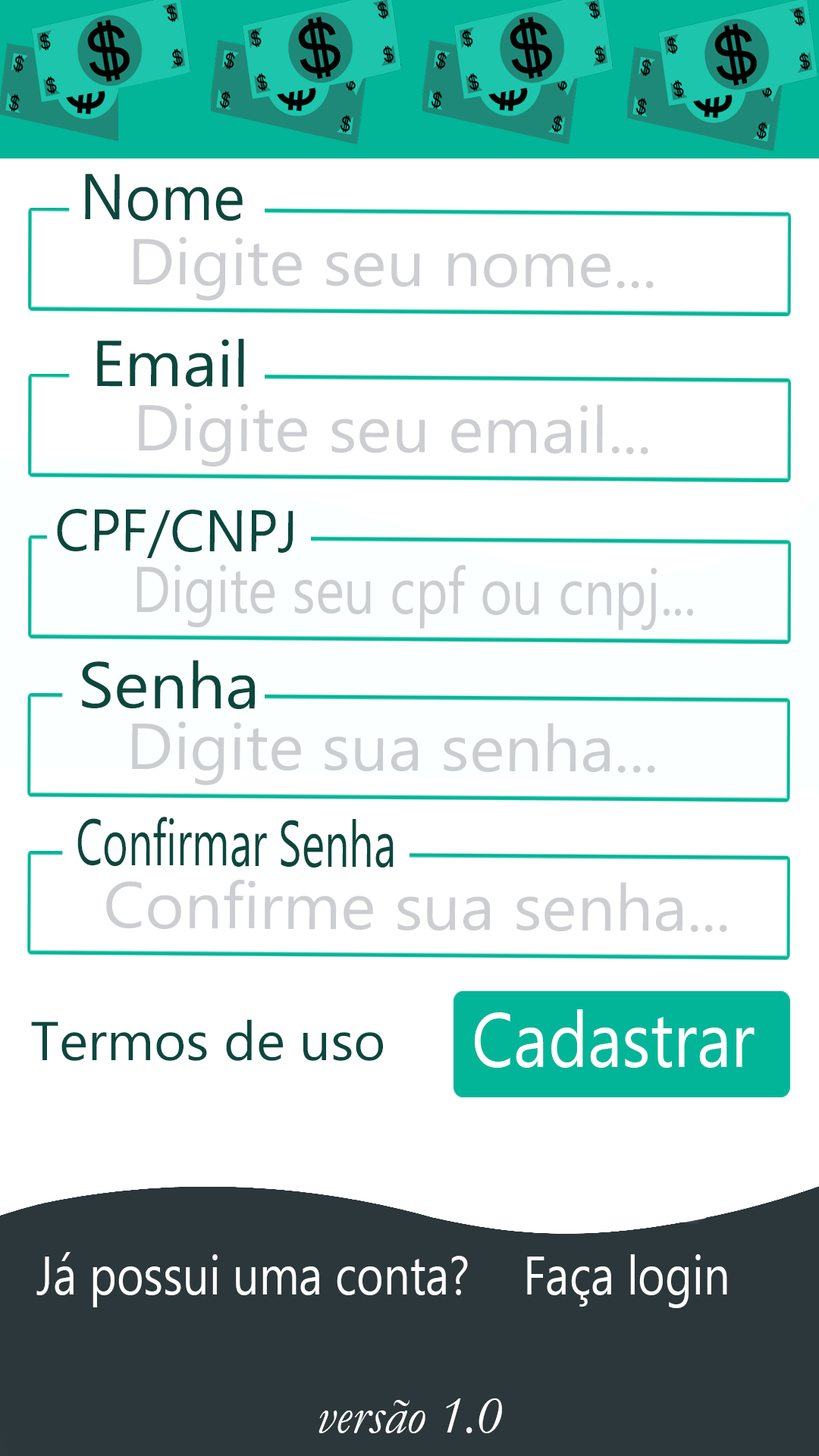
<style>
.page{position:relative;width:819px;height:1456px;background:#ffffff}
.page>*{position:absolute;margin:0}
.t1{font:64.8px "MicrosoftTaiLe";color:#0b473d;scale:0.94 1}
.t2{font:64.9px "MicrosoftNewTaiLue";color:#ccced1;scale:1.04 1}
.t3{font:64.9px "MicrosoftTaiLe";color:#0b473d;scale:1.04 1}
.t4{font:58.9px "MicrosoftTaiLe";color:#0b473d;scale:0.95 1}
.t5{font:64.7px "MicrosoftNewTaiLue";color:#cbced1;scale:0.85 1}
.t6{font:64.9px "MicrosoftNewTaiLue";color:#cbced1;scale:1.04 1}
.t7{font:64.7px "MicrosoftNewTaiLue";color:#0b473d;scale:0.67 1}
.t8{font:77.3px "MicrosoftNewTaiLue";color:#ffffff;scale:0.87 1}
.t9{font:54.6px "MicrosoftNewTaiLue";color:#0b473d}
.t10{font:54.8px "MicrosoftNewTaiLue";color:#ffffff;scale:0.84 1}
.t11{font:54.6px "Garamond-Italic";color:#ffffff}
</style>
<div class="page">
<p class="t1" style="left:85px;top:174px;width:158px;height:47px">Nome</p>
<p class="t2" style="left:133px;top:237px;width:521px;height:64px">Digite seu nome...</p>
<p class="t3" style="left:97px;top:338px;width:147px;height:49px">Email</p>
<p class="t2" style="left:139px;top:403px;width:509px;height:64px">Digite seu email...</p>
<p class="t4" style="left:57px;top:509px;width:236px;height:49px">CPF/CNPJ</p>
<p class="t5" style="left:136px;top:564px;width:557px;height:66px">Digite seu cpf ou cnpj...</p>
<p class="t3" style="left:82px;top:660px;width:173px;height:49px">Senha</p>
<p class="t6" style="left:132px;top:721px;width:523px;height:65px">Digite sua senha...</p>
<p class="t7" style="left:77px;top:817px;width:317px;height:51px">Confirmar Senha</p>
<p class="t2" style="left:106px;top:880px;width:621px;height:52px">Confirme sua senha...</p>
<p class="t8" style="left:475px;top:1009px;width:280px;height:59px">Cadastrar</p>
<p class="t9" style="left:31px;top:1019px;width:352px;height:42px">Termos de uso</p>
<p class="t10" style="left:36px;top:1252px;width:432px;height:55px">Já possui uma conta?</p>
<p class="t10" style="left:527px;top:1254px;width:200px;height:54px">Faça login</p>
<p class="t11" style="left:318px;top:1398px;width:184px;height:35px">versão 1.0</p>
</div>
